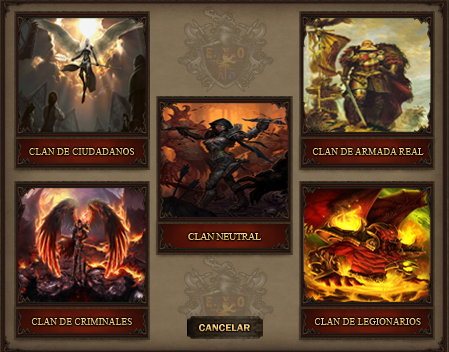
<style>
.page{position:relative;width:449px;height:352px}
.page>*{position:absolute;margin:0}
.t1{font:10px "TimesNewRomanPSMT";scale:0.95 1}
.t2{font:10px "FranklinGothic-Demi";scale:1.07 1}
</style>
<div class="page">
<p class="t1" style="left:29px;top:148px;width:106px;height:7px">CLAN DE CIUDADANOS</p>
<p class="t1" style="left:312px;top:148px;width:112px;height:7px">CLAN DE ARMADA REAL</p>
<p class="t1" style="left:188px;top:233px;width:73px;height:7px">CLAN NEUTRAL</p>
<p class="t1" style="left:31px;top:318px;width:101px;height:7px">CLAN DE CRIMINALES</p>
<p class="t1" style="left:314px;top:318px;width:107px;height:7px">CLAN DE LEGIONARIOS</p>
<p class="t2" style="left:199px;top:324px;width:51px;height:8px">CANCELAR</p>
</div>
